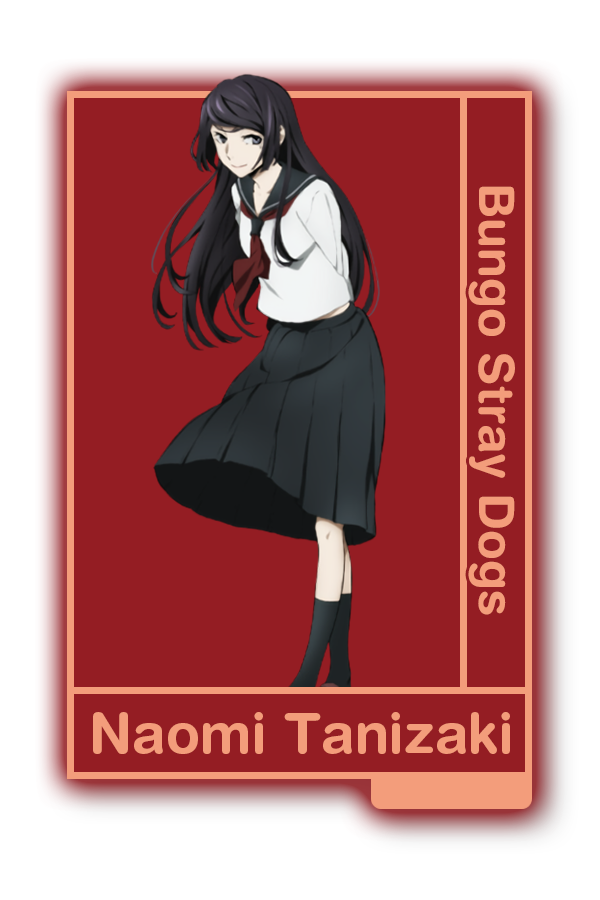
<style>
.page{position:relative;width:600px;height:900px;background:#941d23}
.page>*{position:absolute;margin:0}
.t1{font:48.8px "HelveticaRounded-Bold";color:#f39d7b}
.t2{font:55.4px "HelveticaRounded-Bold";color:#f39d7b}
</style>
<div class="page">
<p class="t1" style="left:468px;top:186px;width:47px;height:429px;rotate:90deg">Bungo Stray Dogs</p>
<p class="t2" style="left:93px;top:712px;width:417px;height:42px">Naomi Tanizaki</p>
</div>
